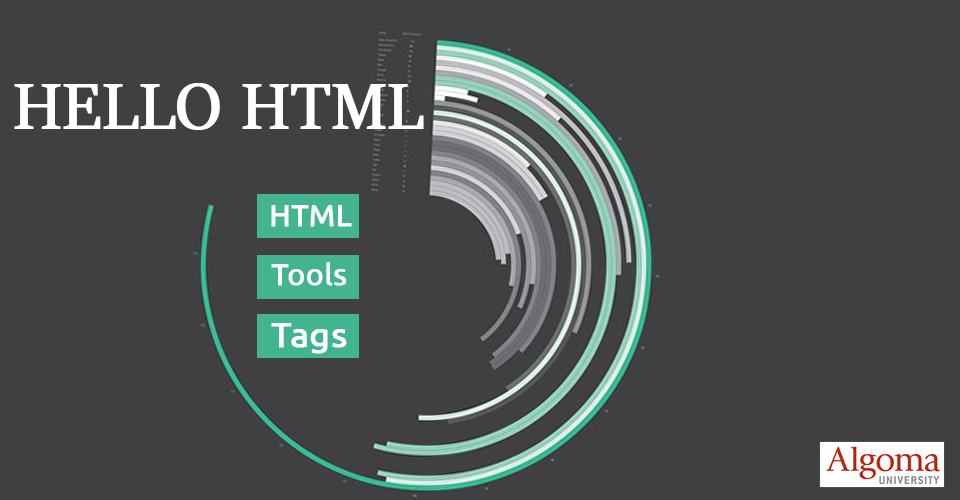
<style>
.page{position:relative;width:960px;height:500px;background:#404042}
.page>*{position:absolute;margin:0}
.t1{font:72px "SitkaBanner";color:#ffffff;font-weight:bold}
.t2{font:30px "Ubuntu";color:#ffffff;font-weight:bold}
.t3{font:35px "Ubuntu";color:#ffffff;font-weight:bold}
</style>
<div class="page">
<p class="t1" style="left:14px;top:83px;width:410px;height:47px">HELLO HTML</p>
<p class="t2" style="left:271px;top:205px;width:81px;height:22px">HTML</p>
<p class="t2" style="left:271px;top:262px;width:76px;height:24px">Tools</p>
<p class="t3" style="left:271px;top:323px;width:76px;height:31px">Tags</p>
</div>
